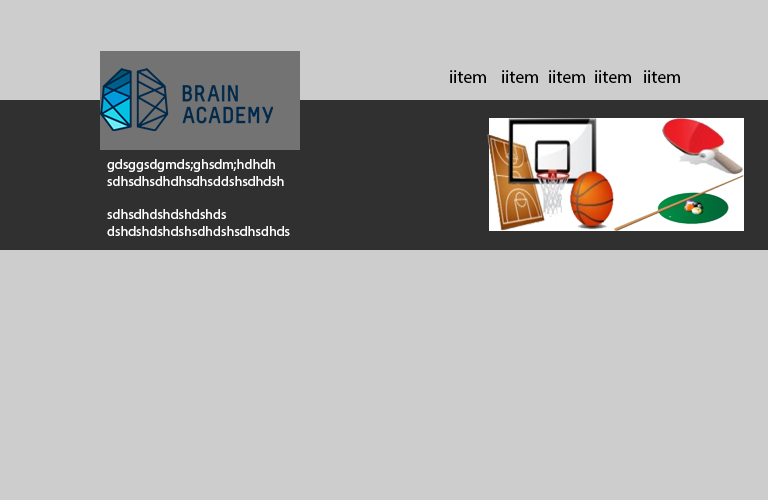
<style>
.page{position:relative;width:768px;height:500px;background:#cdcdcd}
.page>*{position:absolute;margin:0}
.t1{font:18px "MyriadPro-Regular";color:#000000}
.t2{font:14px "MyriadPro-Regular";color:#ffffff}
</style>
<div class="page">
<p class="t1" style="left:450px;top:70px;width:36px;height:13px">iitem</p>
<p class="t1" style="left:502px;top:70px;width:36px;height:13px">iitem</p>
<p class="t1" style="left:549px;top:70px;width:36px;height:13px">iitem</p>
<p class="t1" style="left:595px;top:70px;width:36px;height:13px">iitem</p>
<p class="t1" style="left:644px;top:70px;width:36px;height:13px">iitem</p>
<p class="t2" style="left:107px;top:159px;width:183px;height:77px">gdsggsdgmds;ghsdm;hdhdh<br>sdhsdhsdhdhsdhsddshsdhdsh<br><br>sdhsdhdshdshdshds<br>dshdshdshdshsdhdshsdhsdhds</p>
</div>
